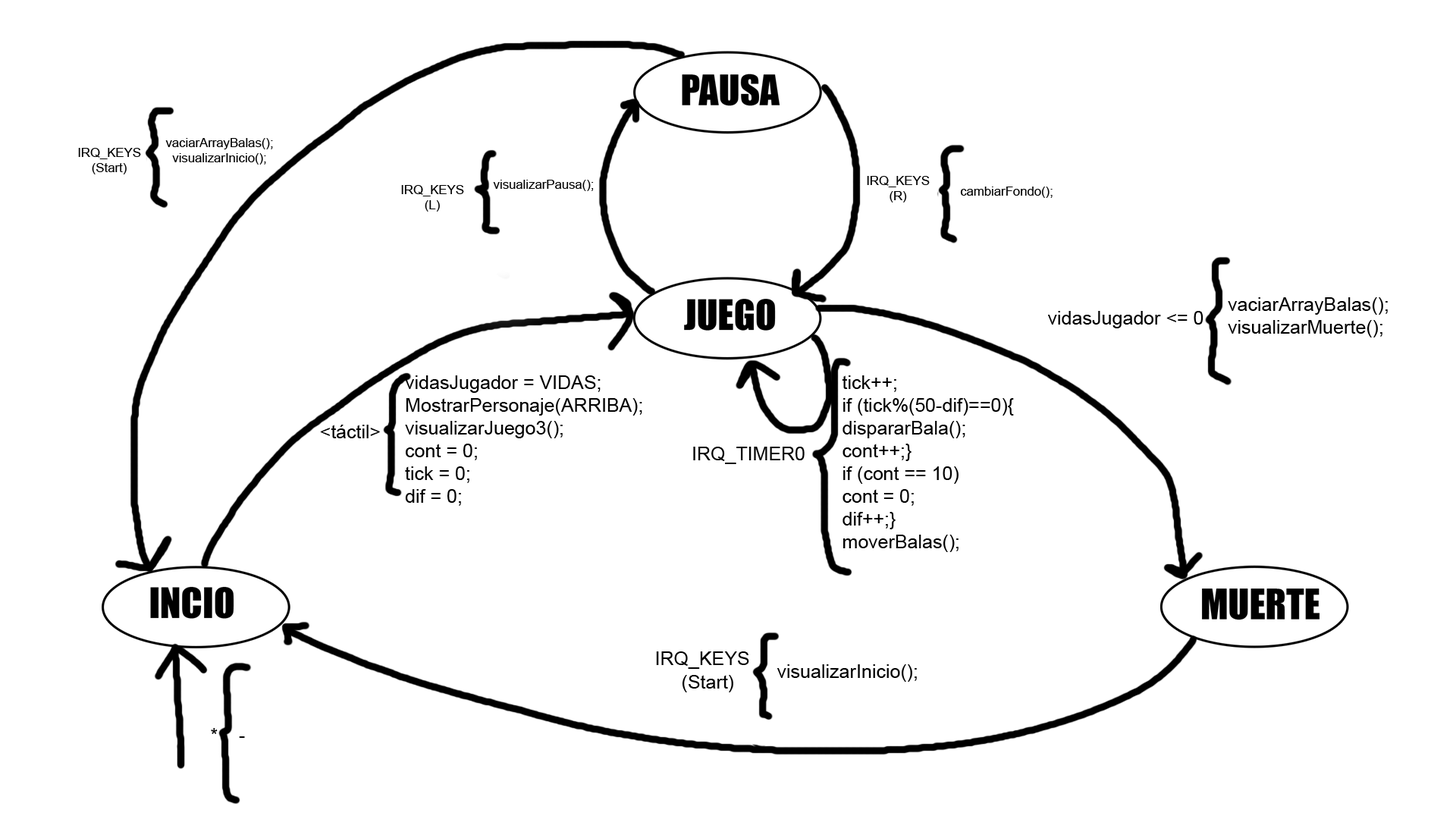
<style>
.page{position:relative;width:1456px;height:819px;background:#ffffff}
.page>*{position:absolute;margin:0}
.t1{font:12.7px "ArialMT";color:#000000}
.t2{font:19px "ArialMT";color:#000000}
</style>
<div class="page">
<p class="t1" style="left:78px;top:148px;width:63px;height:26px;text-align:center">IRQ_KEYS<br>(Start)</p>
<p class="t1" style="left:165px;top:138px;width:108px;height:27px;text-align:center">vaciarArrayBalas();<br>visualizarInicio();</p>
<p class="t1" style="left:401px;top:185px;width:63px;height:27px;text-align:center">IRQ_KEYS<br>(L)</p>
<p class="t1" style="left:493px;top:180px;width:101px;height:11px">visualizarPausa();</p>
<p class="t1" style="left:867px;top:176px;width:63px;height:26px;text-align:center">IRQ_KEYS<br>(R)</p>
<p class="t1" style="left:960px;top:187px;width:93px;height:11px">cambiarFondo();</p>
<p class="t2" style="left:1228px;top:297px;width:160px;height:40px">vaciarArrayBalas();<br>visualizarMuerte();</p>
<p class="t2" style="left:1048px;top:311px;width:155px;height:17px">vidasJugador &lt;= 0</p>
<p class="t2" style="left:405px;top:375px;width:237px;height:131px">vidasJugador = VIDAS;<br>MostrarPersonaje(ARRIBA);<br>visualizarJuego3();<br>cont = 0;<br>tick = 0;<br>dif = 0;</p>
<p class="t2" style="left:842px;top:375px;width:172px;height:177px">tick++;<br>if (tick%(50-dif)==0){<br>dispararBala();<br>cont++;}<br>if (cont == 10)<br>cont = 0;<br>dif++;}<br>moverBalas();</p>
<p class="t2" style="left:320px;top:425px;width:60px;height:13px">&lt;táctil&gt;</p>
<p class="t2" style="left:693px;top:447px;width:112px;height:17px">IRQ_TIMER0</p>
<p class="t2" style="left:656px;top:651px;width:93px;height:18px">IRQ_KEYS</p>
<p class="t2" style="left:777px;top:664px;width:140px;height:18px">visualizarInicio();</p>
<p class="t2" style="left:682px;top:675px;width:51px;height:17px">(Start)</p>
</div>
